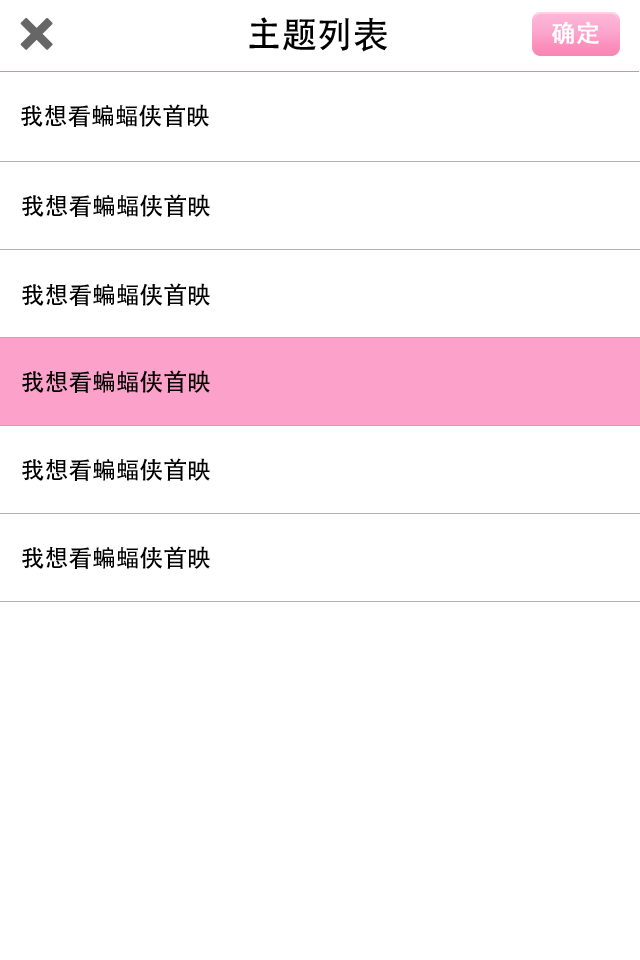
<style>
.page{position:relative;width:640px;height:960px;background:#ffffff}
.page>*{position:absolute;margin:0}
.t1{font:36px "AdobeHeitiStd-Regular";color:#000000}
.t2{font:24px "AdobeHeitiStd-Regular";color:#ffffff;font-weight:bold}
.t3{font:24px "AdobeHeitiStd-Regular";color:#000000}
</style>
<div class="page">
<p class="t1" style="left:249px;top:17px;width:139px;height:35px">主题列表</p>
<p class="t2" style="left:551px;top:21px;width:48px;height:24px">确定</p>
<p class="t3" style="left:21px;top:104px;width:188px;height:23px">我想看蝙蝠侠首映</p>
<p class="t3" style="left:22px;top:194px;width:188px;height:23px">我想看蝙蝠侠首映</p>
<p class="t3" style="left:22px;top:283px;width:188px;height:23px">我想看蝙蝠侠首映</p>
<p class="t3" style="left:22px;top:370px;width:188px;height:23px">我想看蝙蝠侠首映</p>
<p class="t3" style="left:22px;top:458px;width:188px;height:23px">我想看蝙蝠侠首映</p>
<p class="t3" style="left:22px;top:546px;width:188px;height:23px">我想看蝙蝠侠首映</p>
</div>
